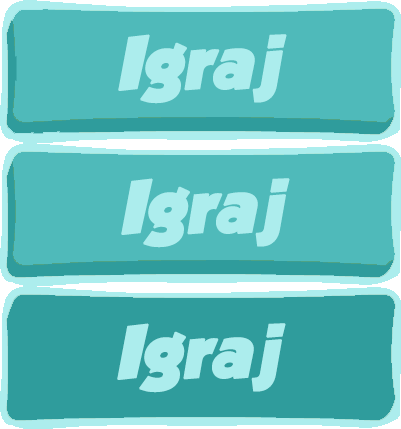
<style>
.page{position:relative;width:401px;height:429px;background:#4fbaba}
.page>*{position:absolute;margin:0}
.t1{font:65px "GROBOLD";color:#aceded;font-weight:bold;font-style:italic}
</style>
<div class="page">
<p class="t1" style="left:118px;top:34px;width:169px;height:70px">Igraj</p>
<p class="t1" style="left:121px;top:178px;width:169px;height:70px">Igraj</p>
<p class="t1" style="left:117px;top:323px;width:169px;height:70px">Igraj</p>
</div>
